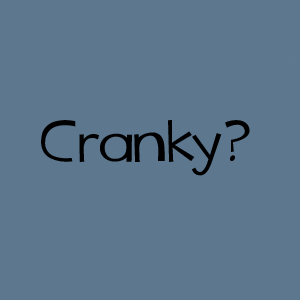
<style>
.page{position:relative;width:300px;height:300px;background:#5d778e}
.page>*{position:absolute;margin:0}
.t1{font:60px "TF2Secondary";color:#000000}
</style>
<div class="page">
<p class="t1" style="left:41px;top:120px;width:209px;height:56px">Cranky?</p>
</div>
